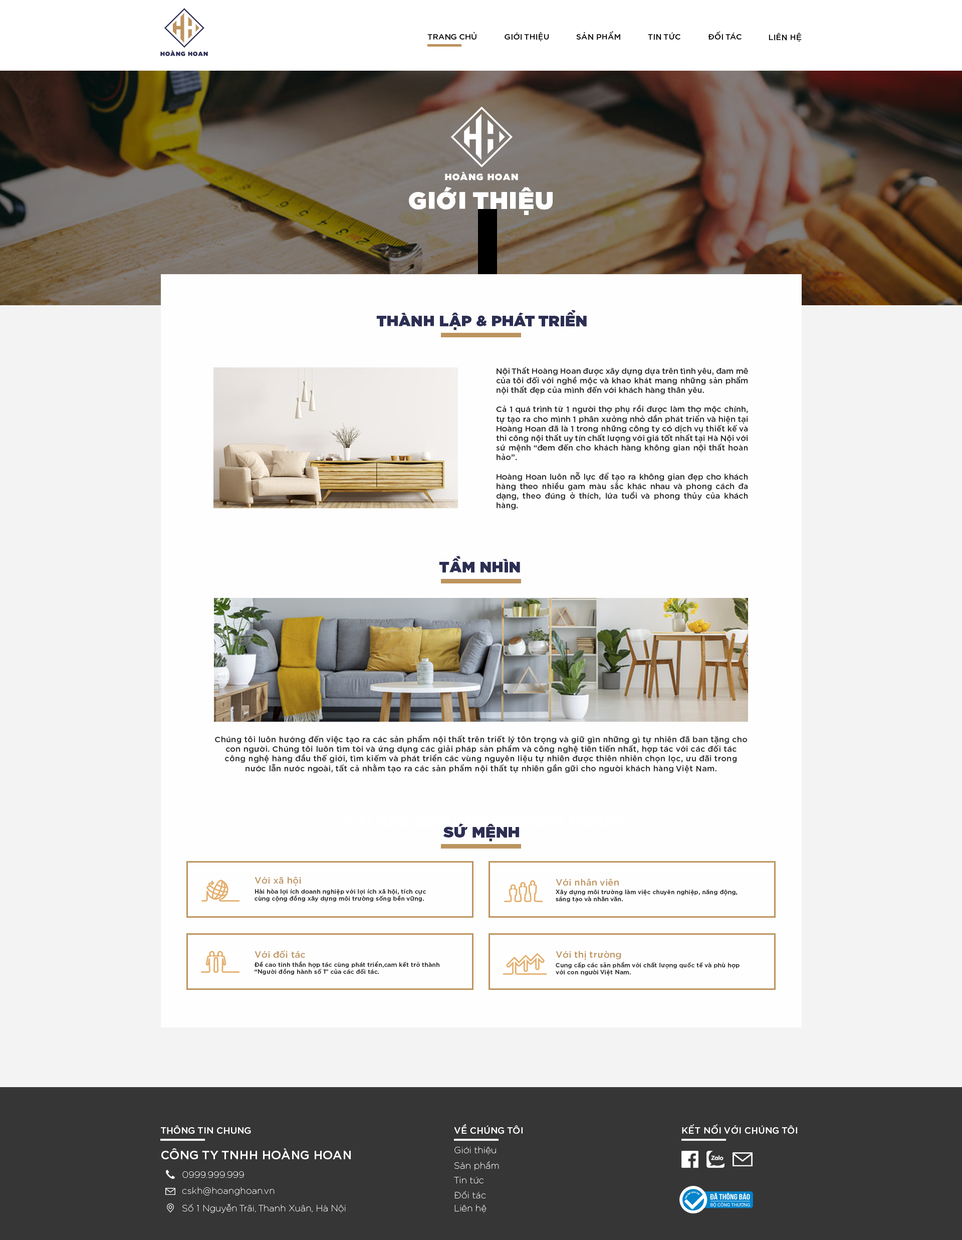
<style>
.page{position:relative;width:962px;height:1240px;background:#fefefe}
.page>*{position:absolute;margin:0}
.t1{font:8px "iCielGotham-Medium";color:#000000;text-transform:uppercase}
.t2{font:24px "iCielGotham-Ultra";letter-spacing:0.05em;color:#ffffff;text-transform:uppercase}
.t3{font:15.2px "iCielGotham-Ultra";letter-spacing:0.025em;color:#2c2e53;text-transform:uppercase}
.t4{font:8px "iCielGotham-Medium";letter-spacing:0.005em;color:#222222}
.t5{font:8px "iCielGotham-Medium";letter-spacing:0.025em;color:#222222}
.t6{font:9px "iCielGotham-Medium";letter-spacing:0.025em;color:#bd945f}
.t7{font:6px "iCielGotham-Medium";letter-spacing:0.025em;color:#222222}
.t8{font:9px "iCielGotham-Medium";letter-spacing:0.025em;color:#ffffff}
.t9{font:9px "iCielGotham-Thin";letter-spacing:0.025em;color:#ffffff}
.t10{font:12px "iCielGotham-Medium";letter-spacing:0.025em;color:#ffffff}
</style>
<div class="page">
<p class="t1" style="left:427px;top:32px;width:49px;height:8px">trang chủ</p>
<p class="t1" style="left:505px;top:32px;width:44px;height:10px">gIớI thIệu</p>
<p class="t1" style="left:576px;top:31px;width:44px;height:9px">sản phẩm</p>
<p class="t1" style="left:648px;top:32px;width:32px;height:8px">tIn tức</p>
<p class="t1" style="left:708px;top:31px;width:34px;height:9px">đốI tác</p>
<p class="t1" style="left:769px;top:33px;width:33px;height:9px">lIên hệ</p>
<p class="t2" style="left:409px;top:186px;width:144px;height:29px">GIỚI THIỆU</p>
<p class="t3" style="left:376px;top:310px;width:211px;height:20px">THÀNH LẬP &amp; PHÁT TRIỂN</p>
<p class="t4" style="left:496px;top:367px;width:252px;height:143px;text-align:justify">Nội Thất Hoàng Hoan được xây dựng dựa trên tình yêu, đam mê của tôi đối với nghề mộc và khao khát mang những sản phẩm nội thất đẹp của mình đến với khách hàng thân yêu.<br><br>Cả 1 quá trình từ 1 người thợ phụ rồi được làm thợ mộc chính, tự tạo ra cho mình 1 phân xưởng nhỏ dần phát triển và hiện tại Hoàng Hoan đã là 1 trong những công ty có dịch vụ thiết kế và thi công nội thất uy tín chất lượng với giá tốt nhất tại Hà Nội với sứ mệnh “đem đến cho khách hàng không gian nội thất hoàn hảo”.<br><br>Hoàng Hoan luôn nỗ lực để tạo ra không gian đẹp cho khách hàng theo nhiều gam màu sắc khác nhau và phong cách đa dạng, theo đúng ở thích, lứa tuổi và phong thủy của khách hàng.</p>
<p class="t3" style="left:439px;top:555px;width:81px;height:18px">tầm nhìn</p>
<p class="t5" style="left:215px;top:735px;width:532px;height:38px;text-align:center">Chúng tôi luôn hướng đến việc tạo ra các sản phẩm nội thất trên triết lý tôn trọng và giữ gìn những gì tự nhiên đã ban tặng cho con người. Chúng tôi luôn tìm tòi và ứng dụng các giải pháp sản phẩm và công nghệ tiên tiến nhất, hợp tác với các đối tác công nghệ hàng đầu thế giới, tìm kiếm và phát triển các vùng nguyên liệu tự nhiên được thiên nhiên chọn lọc, ưu đãi trong nước lẫn nước ngoài, tất cả nhằm tạo ra các sản phẩm nội thất tự nhiên gần gữi cho người khách hàng Việt Nam.</p>
<p class="t3" style="left:443px;top:823px;width:76px;height:18px">sứ mệnh</p>
<p class="t6" style="left:255px;top:876px;width:46px;height:9px">Với xã hội</p>
<p class="t6" style="left:556px;top:878px;width:63px;height:7px">Với nhân viên</p>
<p class="t7" style="left:255px;top:888px;width:171px;height:14px;text-align:justify">Hài hòa lợi ích doanh nghiệp với lợi ích xã hội, tích cực<br>cùng cộng đồng xây dựng môi trường sống bền vững.</p>
<p class="t7" style="left:556px;top:889px;width:181px;height:13px;text-align:justify">Xây dựng môi trường làm việc chuyên nghiệp, năng động,<br>sáng tạo và nhân văn.</p>
<p class="t6" style="left:255px;top:949px;width:50px;height:8px">Với đối tác</p>
<p class="t6" style="left:556px;top:950px;width:65px;height:9px">Với thị trường</p>
<p class="t7" style="left:255px;top:961px;width:184px;height:14px;text-align:justify">Đề cao tinh thần hợp tác cùng phát triển,cam kết trở thành<br>“Người đồng hành số 1” của các đối tác.</p>
<p class="t7" style="left:556px;top:961px;width:184px;height:15px;text-align:justify">Cung cấp các sản phẩm với chất lượng quốc tế và phù hợp <br>với con người Việt Nam.</p>
<p class="t8" style="left:161px;top:1125px;width:90px;height:9px">THÔNG TIN CHUNG</p>
<p class="t8" style="left:454px;top:1123px;width:69px;height:11px">VỀ CHÚNG TÔI</p>
<p class="t8" style="left:682px;top:1124px;width:115px;height:10px">KẾT NỐI VỚI CHÚNG TÔI</p>
<p class="t9" style="left:454px;top:1146px;width:42px;height:8px">Giới thiệu</p>
<p class="t10" style="left:161px;top:1148px;width:190px;height:11px">CÔNG TY TNHH HOÀNG HOAN</p>
<p class="t9" style="left:454px;top:1161px;width:45px;height:9px">Sản phẩm</p>
<p class="t9" style="left:182px;top:1171px;width:62px;height:6px">0999.999.999</p>
<p class="t9" style="left:454px;top:1176px;width:29px;height:7px">Tin tức</p>
<p class="t9" style="left:182px;top:1186px;width:93px;height:9px">cskh@hoanghoan.vn</p>
<p class="t9" style="left:454px;top:1190px;width:32px;height:8px">Đối tác</p>
<p class="t9" style="left:182px;top:1203px;width:164px;height:10px">Số 1 Nguyễn Trãi, Thanh Xuân, Hà Nội</p>
<p class="t9" style="left:454px;top:1204px;width:33px;height:9px">Liên hệ</p>
</div>
